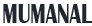
<style>
.page{position:relative;width:92px;height:26px;background:#ffffff}
.page>*{position:absolute;margin:0}
.t1{font:27.9px "BritannicBold";color:#23262e;scale:0.75 1}
</style>
<div class="page">
<p class="t1" style="left:3px;top:4px;width:89px;height:19px">MUMANAL</p>
</div>
